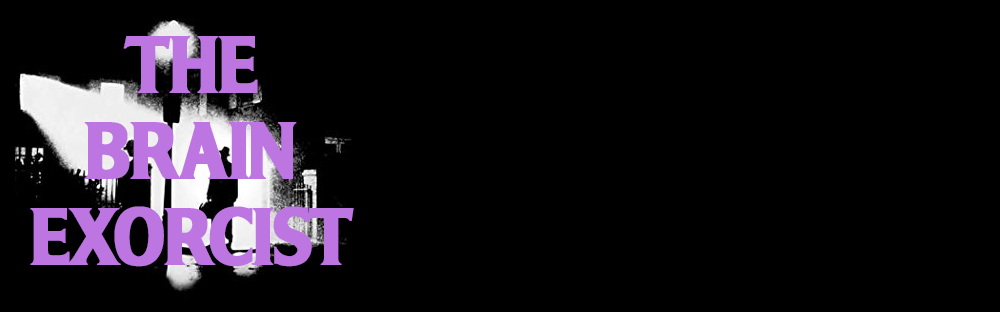
<style>
.page{position:relative;width:1000px;height:312px;background:#000000}
.page>*{position:absolute;margin:0}
.t1{font:72px "OPTIAltheaBold-Two";letter-spacing:-0.05em;color:#bd75e2;font-weight:bold}
</style>
<div class="page">
<p class="t1" style="left:30px;top:36px;width:324px;height:231px;text-align:center">THE<br>BRAIN<br>EXORCIST</p>
</div>
